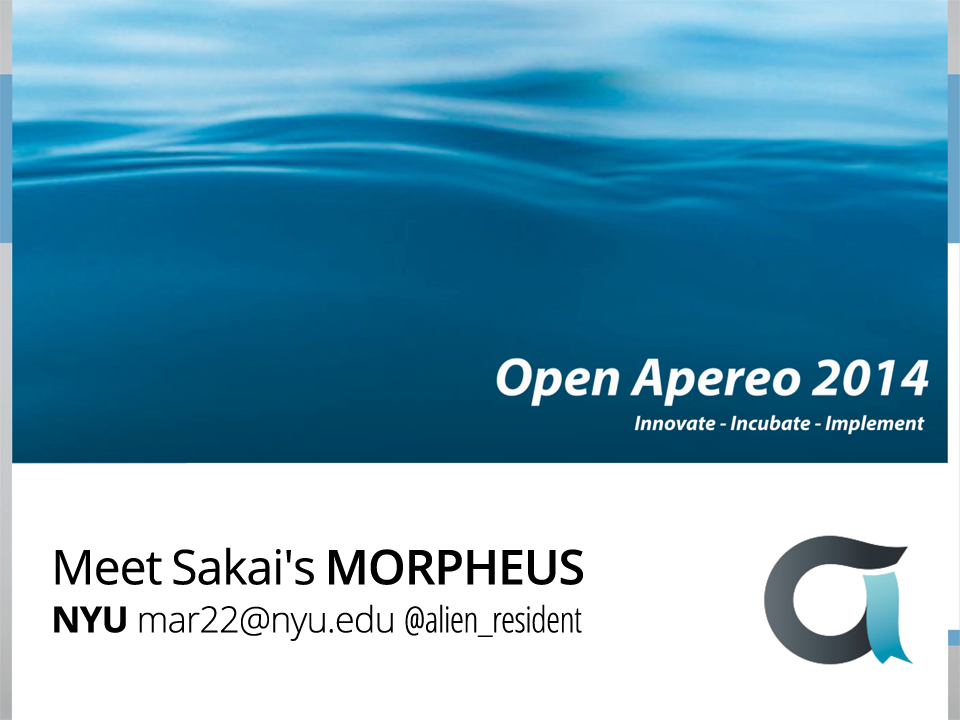
<style>
.page{position:relative;width:960px;height:720px;background:#ffffff}
.page>*{position:absolute;margin:0}
.t1{font:36px/48px "OpenSans-CondensedLight";letter-spacing:-0.02em;color:#000000}
.t2{font:48px/48px "OpenSans";letter-spacing:-0.02em;color:#000000}
.t3{font:48px/48px "OpenSans-Semibold";letter-spacing:-0.02em;color:#000000}
.t4{font:36px/48px "OpenSans-Bold";letter-spacing:-0.02em;color:#000000}
.t5{font:36px/48px "OpenSans-Light";letter-spacing:-0.02em;color:#000000}
</style>
<div class="page">
<p class="t1" style="left:54px;top:547px;width:529px;height:94px"><span class="t2">Meet Sakai's </span><span class="t3">MORPHEUS<br></span><span class="t4">NYU </span><span class="t5">mar22@nyu.edu </span>@alien_resident</p>
</div>
